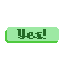
<style>
.page{position:relative;width:64px;height:64px;background:#ffffff}
.page>*{position:absolute;margin:0}
.t1{font:14px "Superscript";color:#236a25}
</style>
<div class="page">
<p class="t1" style="left:17px;top:29px;width:29px;height:10px">Yes!</p>
</div>
